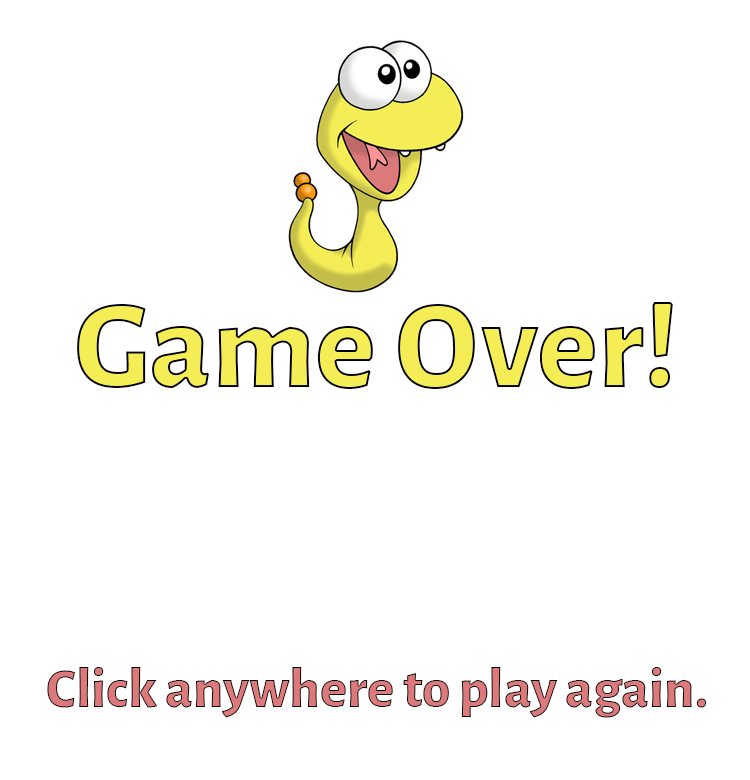
<style>
.page{position:relative;width:750px;height:780px;background:#ffffff}
.page>*{position:absolute;margin:0}
.t1{font:128px "AlegreyaSans-ExtraBold";color:#f4ed56}
.t2{font:57px "AlegreyaSans-ExtraBold"}
</style>
<div class="page">
<p class="t1" style="left:77px;top:302px;width:596px;height:87px">Game Over!</p>
<p class="t2" style="left:47px;top:667px;width:660px;height:51px">Click anywhere to play again.</p>
</div>
